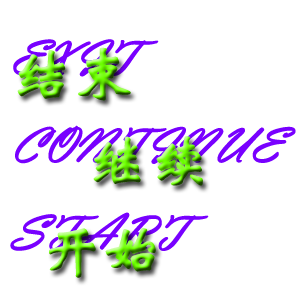
<style>
.page{position:relative;width:300px;height:300px;background:#ffffff}
.page>*{position:absolute;margin:0}
.t1{font:50px "VladimirScript";color:#7800ff;font-weight:bold}
.t2{font:60px "STXinwei";font-weight:bold}
</style>
<div class="page">
<p class="t1" style="left:10px;top:39px;width:286px;height:212px">EXIT<br>CONTINUE<br>START</p>
<p class="t2" style="left:17px;top:47px;width:114px;height:54px">结束</p>
<p class="t2" style="left:93px;top:136px;width:110px;height:50px">继续</p>
<p class="t2" style="left:49px;top:228px;width:107px;height:50px">开始</p>
</div>
